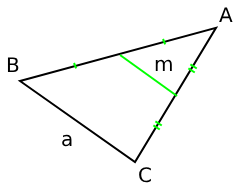
<style>
.page{position:relative;width:240px;height:193px;background:#ffffff}
.page>*{position:absolute;margin:0}
.t1{font:20px "DejaVuSans";color:#000000}
</style>
<div class="page">
<p class="t1" style="left:219px;top:7px;width:14px;height:15px">A</p>
<p class="t1" style="left:7px;top:57px;width:12px;height:15px">B</p>
<p class="t1" style="left:155px;top:59px;width:17px;height:12px">m</p>
<p class="t1" style="left:62px;top:134px;width:10px;height:13px">a</p>
<p class="t1" style="left:139px;top:167px;width:12px;height:16px">C</p>
</div>
